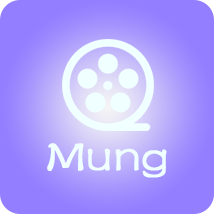
<style>
.page{position:relative;width:214px;height:214px;background:#937eff}
.page>*{position:absolute;margin:0}
.t1{font:48px "FZSTK--GBK1-0";color:#f0ffff;font-weight:bold}
</style>
<div class="page">
<p class="t1" style="left:47px;top:143px;width:120px;height:35px">Mung</p>
</div>
